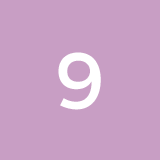
<style>
.page{position:relative;width:160px;height:160px;background:#c89ec4}
.page>*{position:absolute;margin:0}
.t1{font:80px "Montserrat-Regular";color:#ffffff}
</style>
<div class="page">
<p class="t1" style="left:55px;top:52px;width:49px;height:58px">0</p>
<p class="t1" style="left:57px;top:52px;width:44px;height:58px">S</p>
<p class="t1" style="left:58px;top:52px;width:44px;height:58px">8</p>
<p class="t1" style="left:58px;top:52px;width:43px;height:58px">9</p>
<p class="t1" style="left:59px;top:53px;width:46px;height:56px">B</p>
<p class="t1" style="left:59px;top:53px;width:35px;height:57px">J</p>
<p class="t1" style="left:59px;top:53px;width:41px;height:57px">5</p>
</div>
